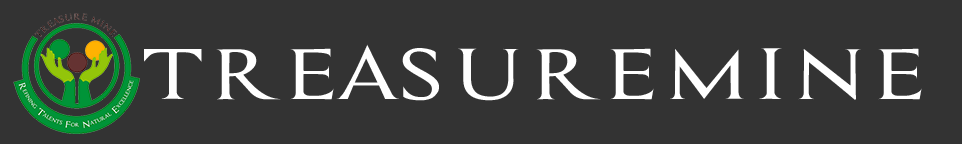
<style>
.page{position:relative;width:962px;height:144px;background:#333333}
.page>*{position:absolute;margin:0}
.t1{font:78.1px "Assassin$";letter-spacing:0.04em;color:#ffffff;scale:1.15 1}
</style>
<div class="page">
<p class="t1" style="left:144px;top:44px;width:778px;height:57px">TREASUREMINE</p>
</div>
